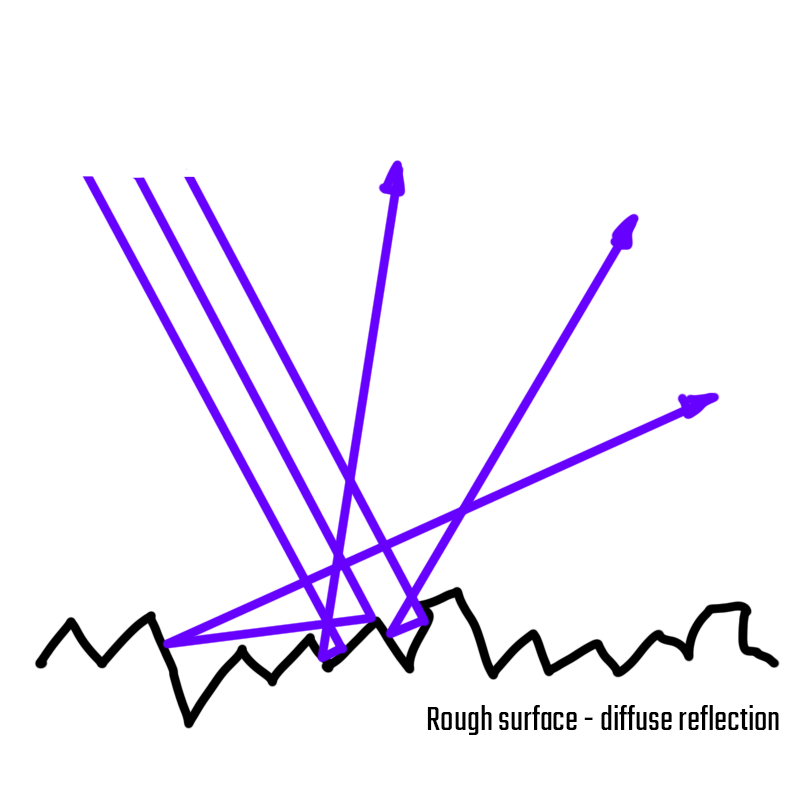
<style>
.page{position:relative;width:800px;height:800px;background:#ffffff}
.page>*{position:absolute;margin:0}
.t1{font:36px "Teko-Regular";color:#000000}
</style>
<div class="page">
<p class="t1" style="left:427px;top:705px;width:352px;height:30px">Rough surface - diffuse reflection</p>
</div>
